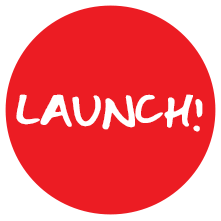
<style>
.page{position:relative;width:221px;height:221px;background:#ec1c23}
.page>*{position:absolute;margin:0}
.t1{font:49.1px "emilyyyyyy";color:#ffffff}
</style>
<div class="page">
<p class="t1" style="left:16px;top:94px;width:187px;height:38px">LAUNCH!</p>
</div>
